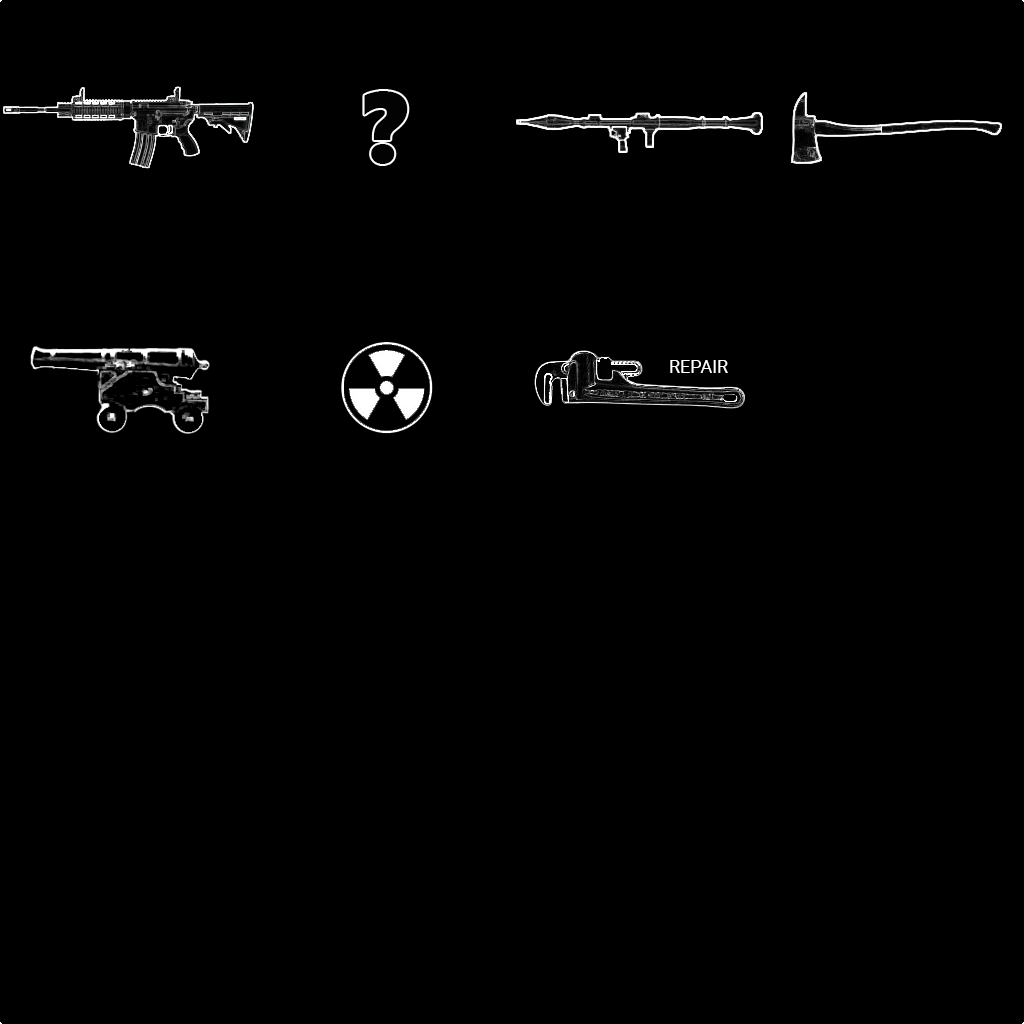
<style>
.page{position:relative;width:1024px;height:1024px;background:#000000}
.page>*{position:absolute;margin:0}
.t1{font:100px "SegoeUIBlack";letter-spacing:-0.007em;color:#030303}
.t2{font:18px "Roboto-Regular";color:#ffffff}
</style>
<div class="page">
<p class="t1" style="left:364px;top:91px;width:44px;height:73px">?</p>
<p class="t2" style="left:670px;top:360px;width:58px;height:13px">REPAIR</p>
</div>
